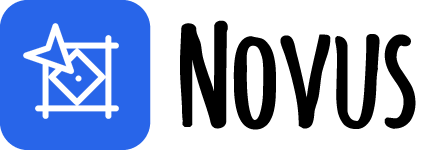
<style>
.page{position:relative;width:437px;height:150px;background:#ffffff}
.page>*{position:absolute;margin:0}
.t1{font:131.2px "AmaticSC-Bold";letter-spacing:-0.05em;color:#000000;font-weight:bold;scale:1.2 1}
</style>
<div class="page">
<p class="t1" style="left:180px;top:20px;width:236px;height:110px">Novus</p>
</div>
